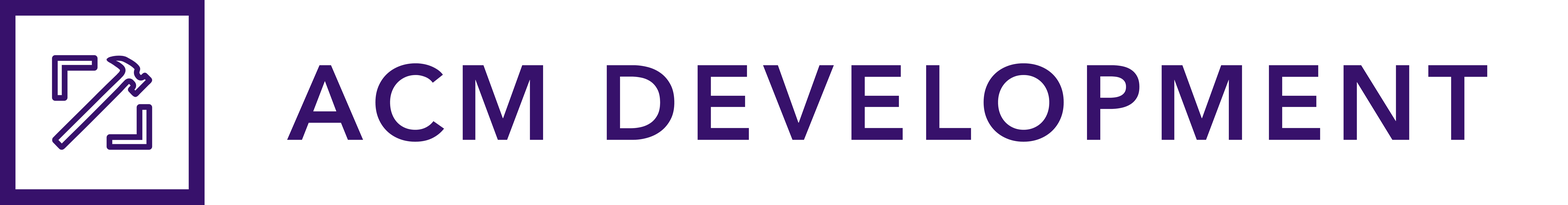
<style>
.page{position:relative;width:1568px;height:205px;background:#ffffff}
.page>*{position:absolute;margin:0}
.t1{font:105.2px "AvenirNext-DemiBold";letter-spacing:0.1em;color:#37116b}
</style>
<div class="page">
<p class="t1" style="left:286px;top:63px;width:1200px;height:78px">ACM DEVELOPMENT</p>
<p class="t1" style="left:287px;top:63px;width:1200px;height:78px">ACM DEVELOPMENT</p>
</div>
